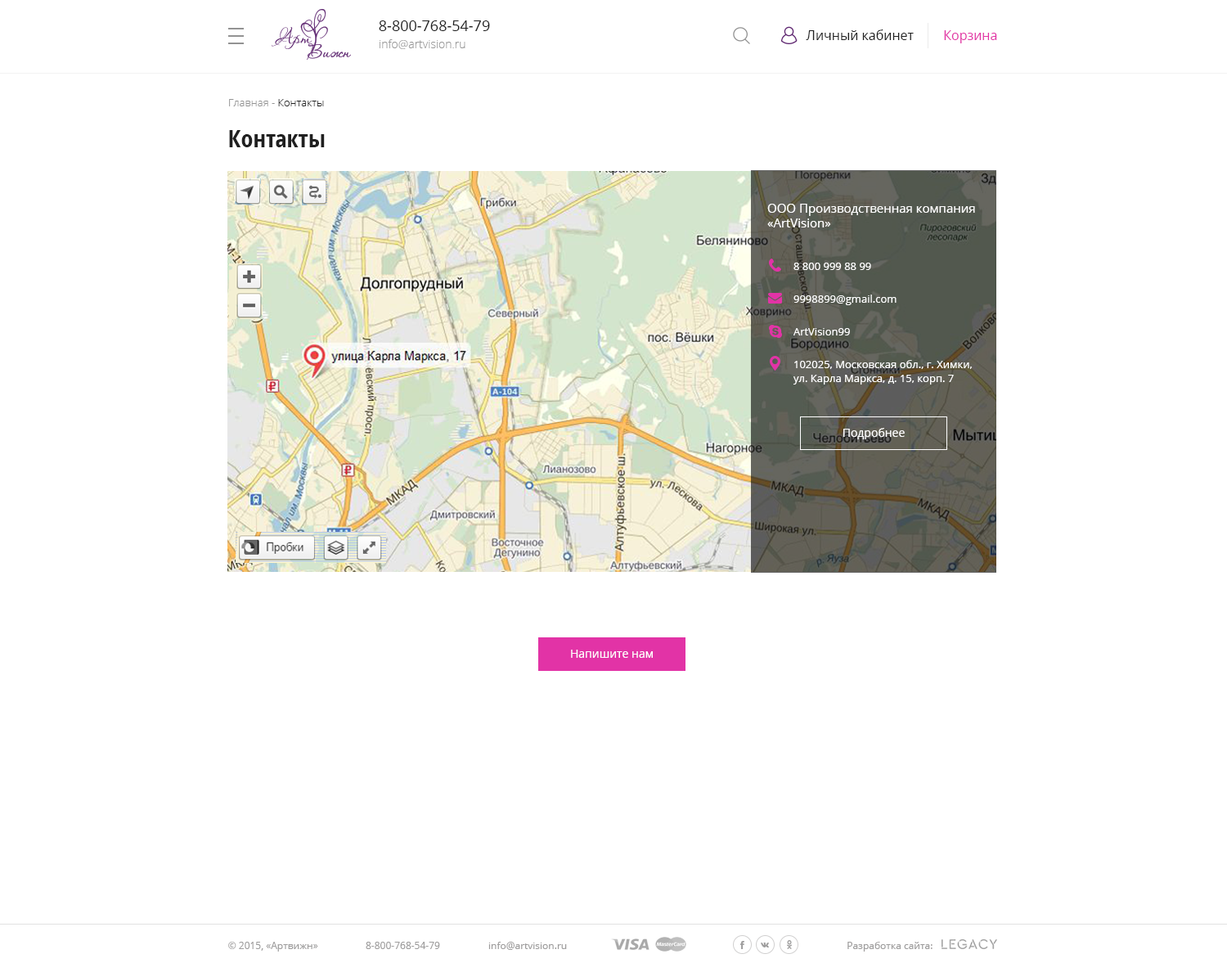
<style>
.page{position:relative;width:1227px;height:972px;background:#ffffff}
.page>*{position:absolute;margin:0}
.t1{font:14.7px "OpenSans";color:#202020}
.t2{font:13.1px "OpenSans";color:#202020}
.t3{font:11.5px "OpenSans-Light";color:#999999}
.t4{font:13.1px "OpenSans";color:#e233a6}
.t5{font:10.6px "OpenSans-Light";color:#939393}
.t6{font:10.6px "OpenSans-Light";color:#202020}
.t7{font:24.5px "OpenSans-CondensedBold";color:#202020}
.t8{font:12.3px/14.7px "OpenSans";color:#ffffff}
.t9{font:10.6px "OpenSans";color:#ffffff}
.t10{font:10.6px/13.9px "OpenSans";color:#ffffff}
.t11{font:11.5px "OpenSans";color:#ffffff}
.t12{font:9.8px "OpenSans";color:#9e9d9d}
</style>
<div class="page">
<p class="t1" style="left:379px;top:20px;width:111px;height:11px">8-800-768-54-79</p>
<p class="t2" style="left:806px;top:29px;width:108px;height:11px">Личный кабинет</p>
<p class="t3" style="left:380px;top:39px;width:85px;height:10px">info@artvision.ru</p>
<p class="t4" style="left:944px;top:30px;width:53px;height:13px">Корзина</p>
<p class="t5" style="left:229px;top:99px;width:95px;height:7px">Главная - <span class="t6">Контакты</span></p>
<p class="t7" style="left:229px;top:130px;width:96px;height:17px">Контакты</p>
<p class="t8" style="left:767px;top:204px;width:208px;height:23px">ООО Производственная компания <br>«ArtVision»</p>
<p class="t9" style="left:793px;top:263px;width:78px;height:7px">8 800 999 88 99</p>
<p class="t9" style="left:793px;top:294px;width:104px;height:11px">9998899@gmail.com</p>
<p class="t9" style="left:793px;top:328px;width:57px;height:7px">ArtVision99</p>
<p class="t10" style="left:793px;top:360px;width:179px;height:24px">102025, Московская обл., г. Химки,<br>ул. Карла Маркса, д. 15, корп. 7</p>
<p class="t11" style="left:843px;top:428px;width:62px;height:11px">Подробнее</p>
<p class="t11" style="left:571px;top:650px;width:82px;height:8px">Напишите нам</p>
<p class="t12" style="left:228px;top:942px;width:90px;height:9px">© 2015, «Артвижн»</p>
<p class="t12" style="left:366px;top:942px;width:74px;height:7px">8-800-768-54-79</p>
<p class="t12" style="left:488px;top:942px;width:79px;height:8px">info@artvision.ru</p>
<p class="t12" style="left:847px;top:942px;width:86px;height:9px">Разработка сайта:</p>
</div>
